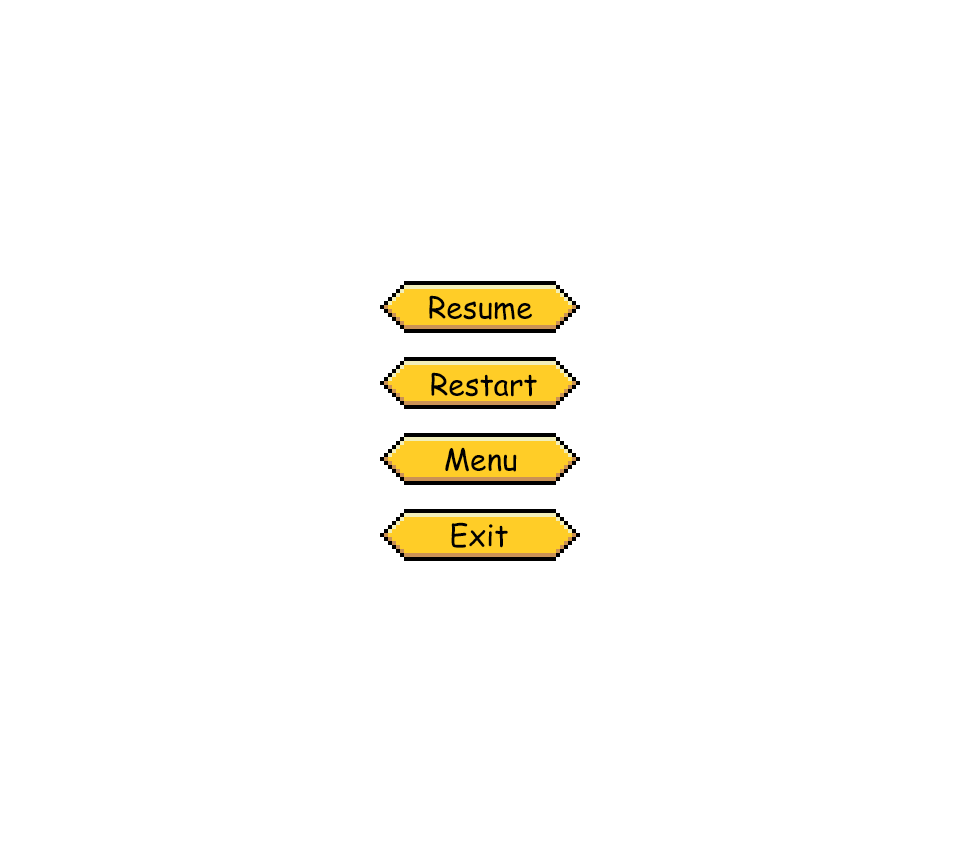
<style>
.page{position:relative;width:960px;height:864px;background:#ffffff}
.page>*{position:absolute;margin:0}
.t1{font:30px "ComicSansMS";color:#000000}
</style>
<div class="page">
<p class="t1" style="left:429px;top:295px;width:103px;height:25px">Resume</p>
<p class="t1" style="left:431px;top:372px;width:106px;height:25px">Restart</p>
<p class="t1" style="left:445px;top:447px;width:72px;height:25px">Menu</p>
<p class="t1" style="left:451px;top:522px;width:57px;height:26px">Exit</p>
</div>
